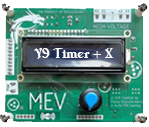
<style>
.page{position:relative;width:149px;height:127px}
.page>*{position:absolute;margin:0}
.t1{font:13.3px "VNI-Duff";color:#ffffff}
</style>
<div class="page">
<p class="t1" style="left:34px;top:48px;width:80px;height:11px">V9 Timer + X</p>
</div>
